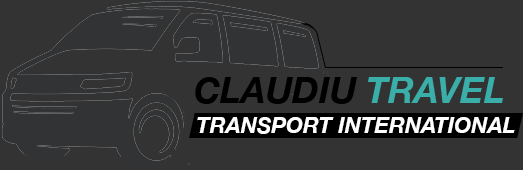
<style>
.page{position:relative;width:523px;height:170px;background:#333333}
.page>*{position:absolute;margin:0}
.t1{font:36px "HelveticaNeue-BoldItalic";color:#000000}
.t2{font:36px "HelveticaNeue-BoldItalic";color:#3aafa9}
.t3{font:22px "HelveticaNeue-BoldItalic";color:#ffffff}
</style>
<div class="page">
<p class="t1" style="left:195px;top:77px;width:162px;height:27px">CLAUDIU</p>
<p class="t2" style="left:367px;top:77px;width:136px;height:26px">TRAVEL</p>
<p class="t3" style="left:197px;top:117px;width:318px;height:17px">TRANSPORT INTERNATIONAL</p>
</div>
